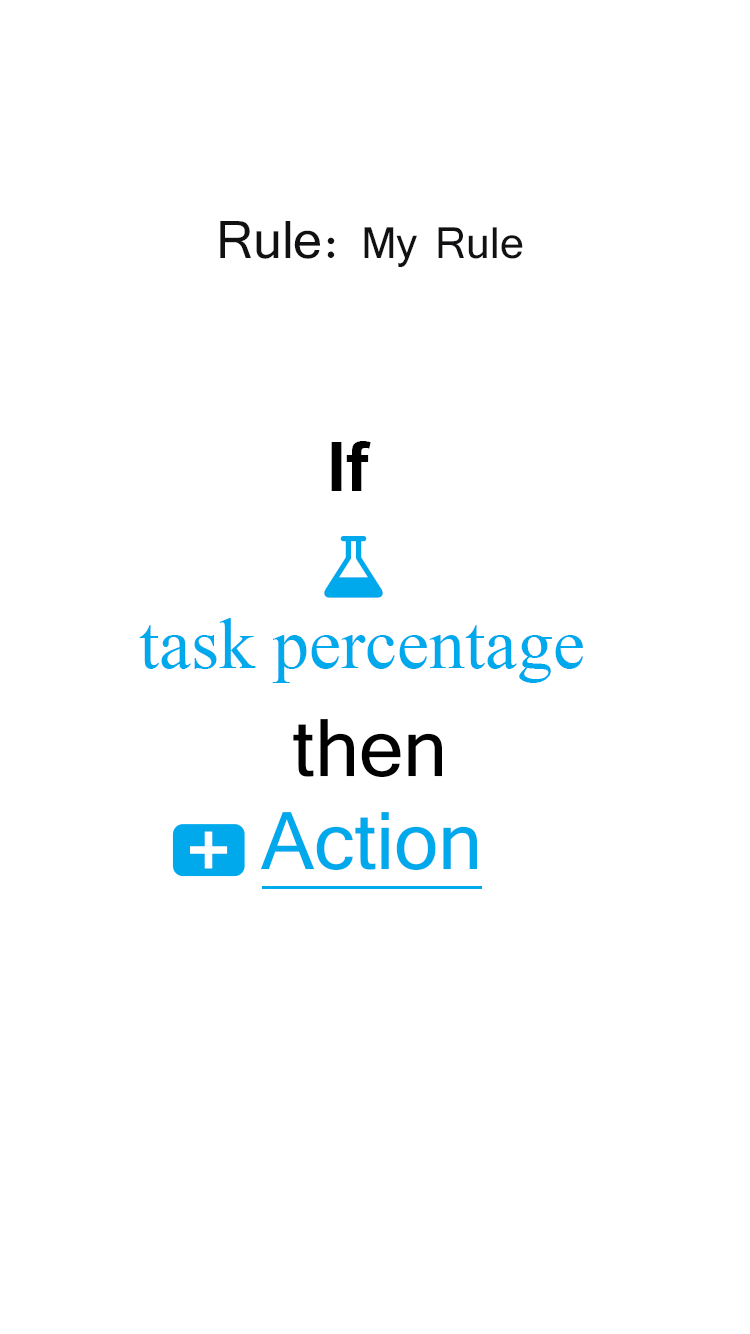
<style>
.page{position:relative;width:750px;height:1334px;background:#ffffff}
.page>*{position:absolute;margin:0}
.t1{font:55.1px "Tunga";color:#111114}
.t2{font:66.2px "Tunga";color:#111114}
.t3{font:67.7px "Arial-BoldMT";color:#000000}
.t4{font:72px "TimesNewRomanPSMT";color:#00a8ec}
.t5{font:101.6px "Tunga";color:#000000}
.t6{font:101.6px "Tunga";color:#00a8ec}
.t7{font:117.1px "Tunga";color:#ffffff}
</style>
<div class="page">
<p class="t1" style="left:220px;top:221px;width:303px;height:46px"><span class="t2"> Rule: </span>My Rule</p>
<p class="t3" style="left:331px;top:441px;width:40px;height:50px">If</p>
<p class="t4" style="left:139px;top:618px;width:444px;height:65px">task percentage</p>
<p class="t5" style="left:293px;top:719px;width:149px;height:58px">then</p>
<p class="t6" style="left:260px;top:812px;width:217px;height:58px">Action</p>
<p class="t7" style="left:190px;top:831px;width:38px;height:38px">+</p>
</div>
